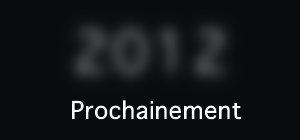
<style>
.page{position:relative;width:300px;height:140px;background:#090b0d}
.page>*{position:absolute;margin:0}
.t1{font:24px "Thonburi-Bold";color:#ffffff}
</style>
<div class="page">
<p class="t1" style="left:72px;top:100px;width:170px;height:20px">Prochainement</p>
</div>
